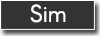
<style>
.page{position:relative;width:100px;height:36px;background:#333333}
.page>*{position:absolute;margin:0}
.t1{font:24px "Arcon-Regular";color:#ffffff}
</style>
<div class="page">
<p class="t1" style="left:30px;top:4px;width:36px;height:19px">Sim</p>
</div>
